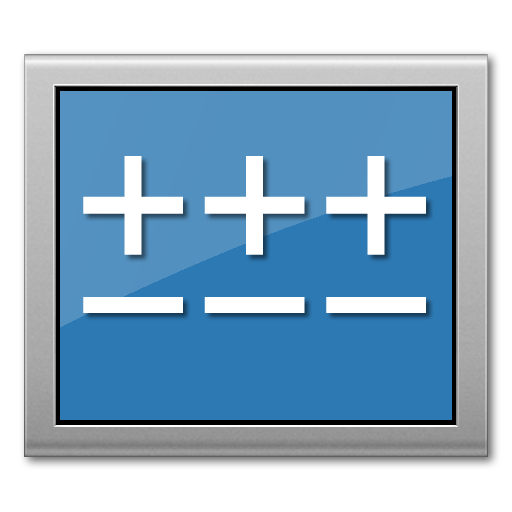
<style>
.page{position:relative;width:512px;height:512px;background:#ffffff}
.page>*{position:absolute;margin:0}
.t1{font:243.2px "TrebuchetMS";letter-spacing:-0.025em;color:#ffffff}
</style>
<div class="page">
<p class="t1" style="left:83px;top:156px;width:343px;height:99px">+++</p>
</div>
